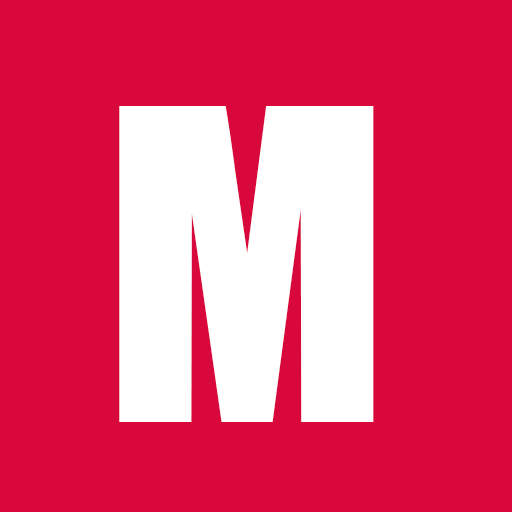
<style>
.page{position:relative;width:512px;height:512px;background:#d9083c}
.page>*{position:absolute;margin:0}
.t1{font:400px "Impact";color:#ffffff}
</style>
<div class="page">
<p class="t1" style="left:119px;top:106px;width:255px;height:316px">M</p>
</div>
